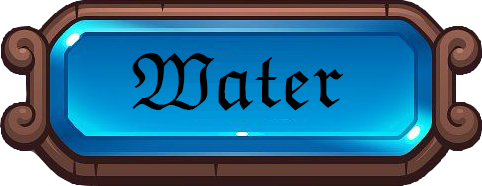
<style>
.page{position:relative;width:482px;height:186px}
.page>*{position:absolute;margin:0}
.t1{font:80px "EuclidFraktur";color:#000000}
</style>
<div class="page">
<p class="t1" style="left:132px;top:53px;width:211px;height:58px">Water</p>
</div>
